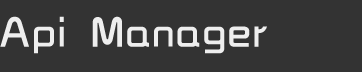
<style>
.page{position:relative;width:362px;height:72px;background:#333333}
.page>*{position:absolute;margin:0}
.t1{font:40px "TRENDS";letter-spacing:0.08em;color:#eeeeee}
</style>
<div class="page">
<p class="t1" style="left:0px;top:16px;width:267px;height:38px">Api Manager</p>
</div>
